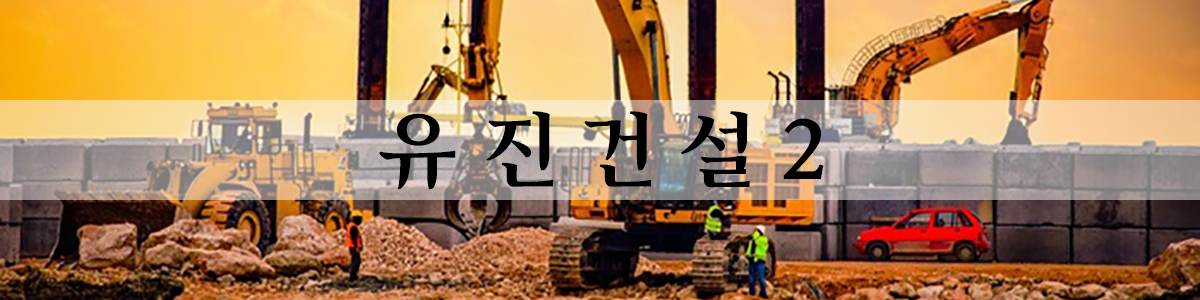
<style>
.page{position:relative;width:1200px;height:300px}
.page>*{position:absolute;margin:0}
.t1{font:83.3px "Arita-buri-Bold_OTF";color:#010101}
</style>
<div class="page">
<p class="t1" style="left:379px;top:111px;width:445px;height:79px">유 진 건 설 2</p>
</div>
